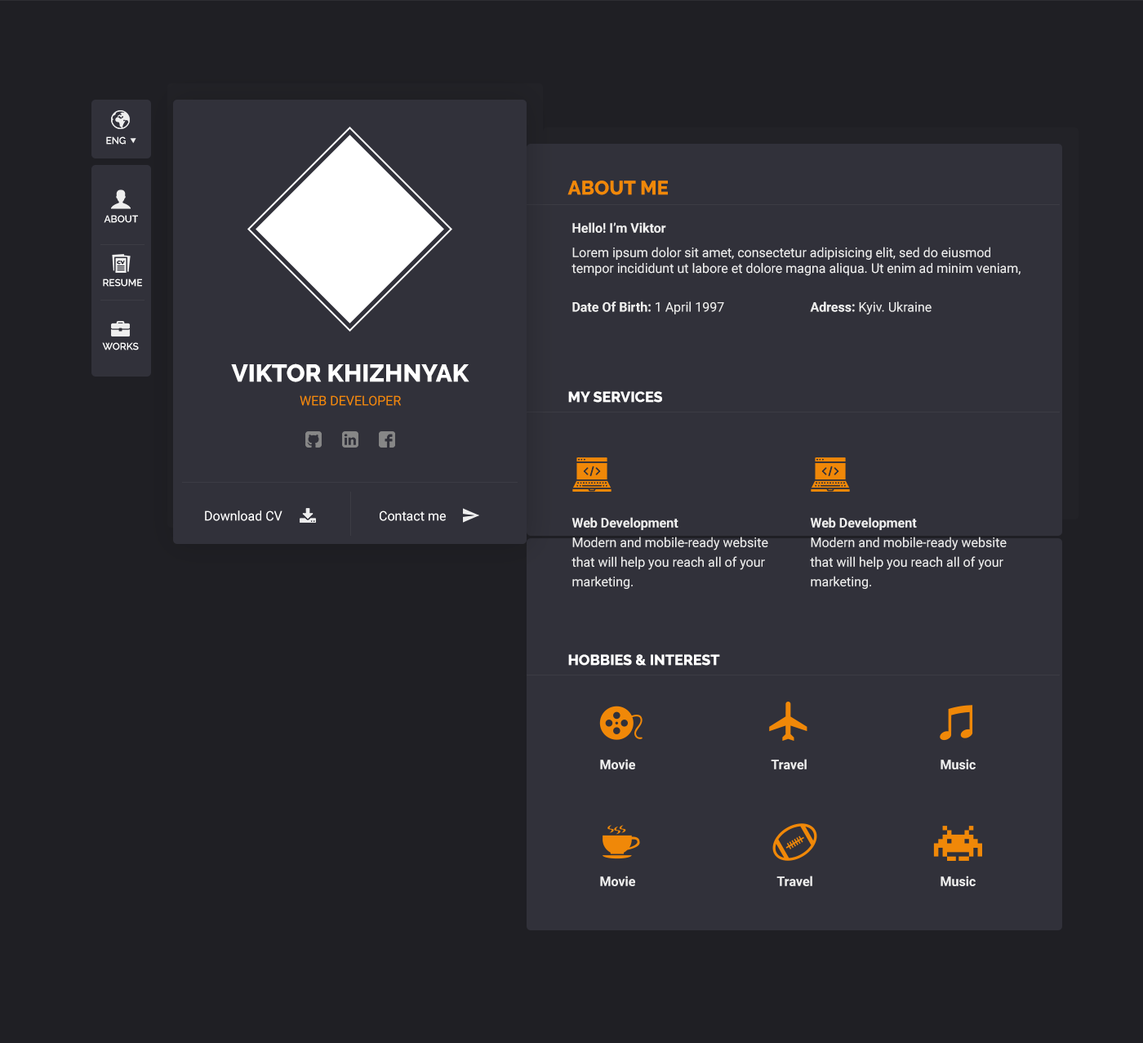
<style>
.page{position:relative;width:1143px;height:1043px;background:#1f1f24}
.page>*{position:absolute;margin:0}
.t1{font:9.8px "Raleway-SemiBold";color:#ffffff;text-transform:uppercase}
.t2{font:19.6px "Raleway-ExtraBold";color:#f08808;text-transform:uppercase}
.t3{font:13.1px "Roboto-Regular";color:#eeeeee}
.t4{font:13.1px/14.7px "Roboto-Bold";color:#eeeeee}
.t5{font:13.1px/19.6px "Roboto-Regular";color:#eeeeee}
.t6{font:13.1px/24.5px "Roboto-Regular";color:#eeeeee}
.t7{font:13.1px "Roboto-Bold";color:#eeeeee}
.t8{font:24.5px "Raleway-ExtraBold";color:#ffffff;text-transform:uppercase}
.t9{font:13.1px "Roboto-Regular";color:#f08808;text-transform:uppercase}
.t10{font:14.7px "Raleway-ExtraBold";color:#ffffff;text-transform:uppercase}
.t11{font:13.1px "Roboto-Regular";color:#ffffff}
.t12{font:14.7px "Raleway-ExtraBold";color:#ffffff}
</style>
<div class="page">
<p class="t1" style="left:106px;top:136px;width:20px;height:9px">ENg</p>
<p class="t2" style="left:568px;top:180px;width:100px;height:15px">About me</p>
<p class="t1" style="left:104px;top:215px;width:34px;height:8px">About</p>
<p class="t3" style="left:572px;top:222px;width:449px;height:54px"><span class="t4">Hello! I’m Viktor<br></span><span class="t5">L</span><span class="t6">orem ipsu</span><span class="t5">m dolor sit amet, consectetur adipisicing elit, sed do eiusmod <br></span>tempor incididunt ut labore et dolore magna aliqua. Ut enim ad minim veniam,</p>
<p class="t1" style="left:103px;top:278px;width:39px;height:9px">Resume</p>
<p class="t7" style="left:572px;top:301px;width:152px;height:13px">Date Of Birth: <span class="t3">1 April 1997</span></p>
<p class="t3" style="left:810px;top:301px;width:122px;height:13px"><span class="t7">Adress: </span>Kyiv. Ukraine</p>
<p class="t1" style="left:102px;top:342px;width:37px;height:8px">works</p>
<p class="t8" style="left:231px;top:363px;width:239px;height:19px">Viktor Khizhnyak</p>
<p class="t9" style="left:300px;top:395px;width:101px;height:11px">Web Developer</p>
<p class="t10" style="left:568px;top:391px;width:94px;height:12px">My services</p>
<p class="t11" style="left:205px;top:510px;width:78px;height:11px">Download CV</p>
<p class="t11" style="left:380px;top:510px;width:66px;height:11px">Contact me</p>
<p class="t5" style="left:572px;top:517px;width:197px;height:72px"><span class="t4">Web Development<br></span>Modern and mobile-ready website <br>that will help you reach all of your <br>marketing.</p>
<p class="t5" style="left:810px;top:517px;width:197px;height:72px"><span class="t4">Web Development<br></span>Modern and mobile-ready website <br>that will help you reach all of your <br>marketing.</p>
<p class="t10" style="left:568px;top:654px;width:152px;height:12px">Hobbies <span class="t12">&amp;</span> interest</p>
<p class="t7" style="left:600px;top:759px;width:35px;height:10px">Movie</p>
<p class="t7" style="left:771px;top:759px;width:36px;height:10px">Travel</p>
<p class="t7" style="left:941px;top:759px;width:35px;height:10px">Music</p>
<p class="t7" style="left:600px;top:875px;width:35px;height:11px">Movie</p>
<p class="t7" style="left:777px;top:875px;width:36px;height:11px">Travel</p>
<p class="t7" style="left:941px;top:875px;width:35px;height:11px">Music</p>
</div>
